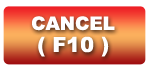
<style>
.page{position:relative;width:150px;height:70px;background:#ffffff}
.page>*{position:absolute;margin:0}
.t1{font:18.4px "Arial-Black";color:#ffffff}
.t2{font:20.9px "Arial-Black";color:#ffffff}
</style>
<div class="page">
<p class="t1" style="left:32px;top:16px;width:83px;height:15px">CANCEL</p>
<p class="t2" style="left:38px;top:36px;width:71px;height:21px">( F10 )</p>
</div>
